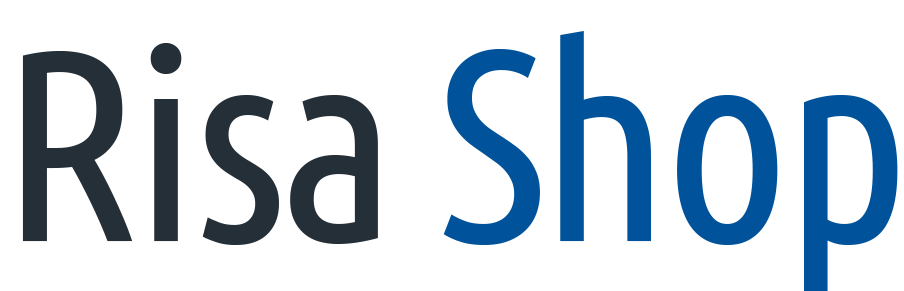
<style>
.page{position:relative;width:904px;height:291px;background:#ffffff}
.page>*{position:absolute;margin:0}
.t1{font:271.3px "UbuntuCondensed-Regular";letter-spacing:-0.025em;color:#242f38}
.t2{font:271.3px "UbuntuCondensed-Regular";letter-spacing:-0.025em;color:#00539a}
</style>
<div class="page">
<p class="t1" style="left:22px;top:31px;width:876px;height:260px">Risa <span class="t2">Shop</span></p>
</div>
